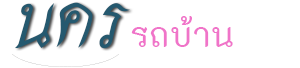
<style>
.page{position:relative;width:300px;height:68px;background:#ffffff}
.page>*{position:absolute;margin:0}
.t1{font:108.1px "THSrisakdi-Bold";color:#25596f;scale:1.06 1}
.t2{font:49.4px "THK2DJuly8-Bold";color:#f074c9;scale:0.96 1}
</style>
<div class="page">
<p class="t1" style="left:15px;top:2px;width:115px;height:47px">นคร</p>
<p class="t2" style="left:131px;top:16px;width:102px;height:31px">รถบ้าน</p>
</div>
